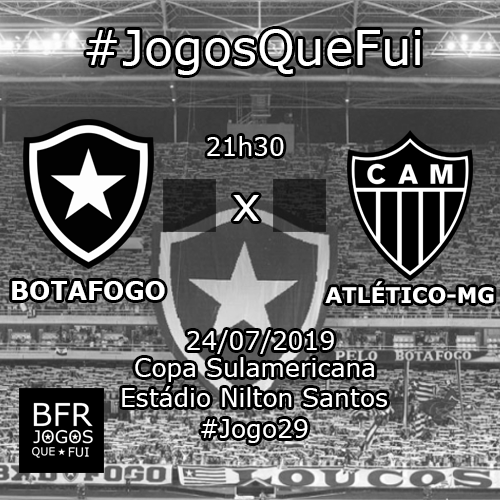
<style>
.page{position:relative;width:500px;height:500px}
.page>*{position:absolute;margin:0}
.t1{font:48px "Verdana";color:#ffffff}
.t2{font:25px "Verdana";color:#ffffff}
.t3{font:25px "Verdana-Bold";color:#ffffff}
.t4{font:21.6px "Verdana-Bold";color:#ffffff}
</style>
<div class="page">
<p class="t1" style="left:86px;top:29px;width:335px;height:46px">#JogosQueFui</p>
<p class="t2" style="left:207px;top:136px;width:77px;height:20px">21h30</p>
<p class="t1" style="left:233px;top:195px;width:26px;height:26px">x</p>
<p class="t3" style="left:12px;top:281px;width:153px;height:19px">BOTAFOGO</p>
<p class="t4" style="left:325px;top:281px;width:169px;height:23px">ATLÉTICO-MG</p>
<p class="t2" style="left:187px;top:330px;width:147px;height:24px">24/07/2019</p>
<p class="t2" style="left:135px;top:357px;width:239px;height:25px">Copa Sulamericana</p>
<p class="t2" style="left:122px;top:386px;width:265px;height:21px">Estádio Nilton Santos</p>
<p class="t2" style="left:201px;top:419px;width:107px;height:24px">#Jogo29</p>
</div>
